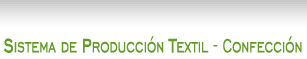
<style>
.page{position:relative;width:307px;height:59px;background:#ffffff}
.page>*{position:absolute;margin:0}
.t1{font:24.3px "EngraversGothicBT-Regular";color:#619c24;scale:0.65 1}
.t2{font:24.3px "EngraversGothicBT-Regular";color:#619c24;font-weight:bold;scale:0.65 1}
</style>
<div class="page">
<p class="t1" style="left:4px;top:36px;width:298px;height:17px"><span class="t2">S</span>istema de <span class="t2">P</span>roducción <span class="t2">T</span>extil - Confección</p>
</div>
